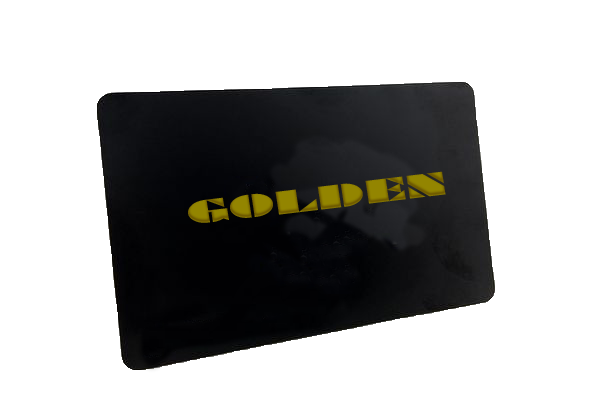
<style>
.page{position:relative;width:615px;height:409px;background:#ffffff}
.page>*{position:absolute;margin:0}
.t1{font:30px "Braggadocio";color:#908100;scale:1.52 1}
</style>
<div class="page">
<p class="t1" style="left:188px;top:171px;width:258px;height:52px;rotate:-7deg">GOLDEN</p>
</div>
